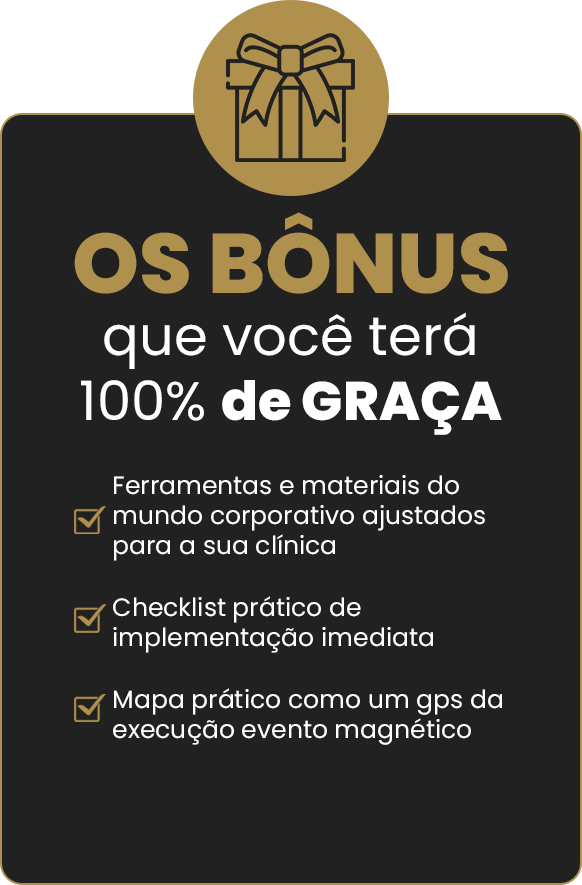
<style>
.page{position:relative;width:582px;height:885px;background:#212121}
.page>*{position:absolute;margin:0}
.t1{font:84.3px "Poppins-ExtraBold";color:#af914d;text-transform:uppercase}
.t2{font:54.2px "Poppins-Regular";color:#ffffff}
.t3{font:54.2px "Poppins-ExtraBold";color:#ffffff}
.t4{font:25.1px "Poppins-Regular";color:#ffffff}
</style>
<div class="page">
<p class="t1" style="left:74px;top:212px;width:434px;height:82px">Os bônus</p>
<p class="t2" style="left:81px;top:312px;width:421px;height:123px;text-align:center">que você terá<br>100% <span class="t3">de GRAÇA</span></p>
<p class="t4" style="left:114px;top:475px;width:371px;height:86px">Ferramentas e materiais do <br>mundo corporativo ajustados <br>para a sua clínica</p>
<p class="t4" style="left:113px;top:596px;width:320px;height:57px">Checklist prático de <br>implementação imediata</p>
<p class="t4" style="left:113px;top:688px;width:389px;height:57px">Mapa prático como um gps da <br>execução evento magnético</p>
</div>
